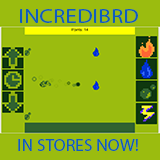
<style>
.page{position:relative;width:160px;height:160px;background:#9bbc0f}
.page>*{position:absolute;margin:0}
.t1{font:20.6px "MyriadPro-Regular";color:#0f5dbd;scale:1.13 1}
.t2{font:17px "MyriadPro-Regular";color:#0f5dbd;scale:1.03 1}
</style>
<div class="page">
<p class="t1" style="left:20px;top:9px;width:118px;height:14px">INCREDIBRD</p>
<p class="t2" style="left:18px;top:139px;width:120px;height:12px">IN STORES NOW!</p>
</div>
